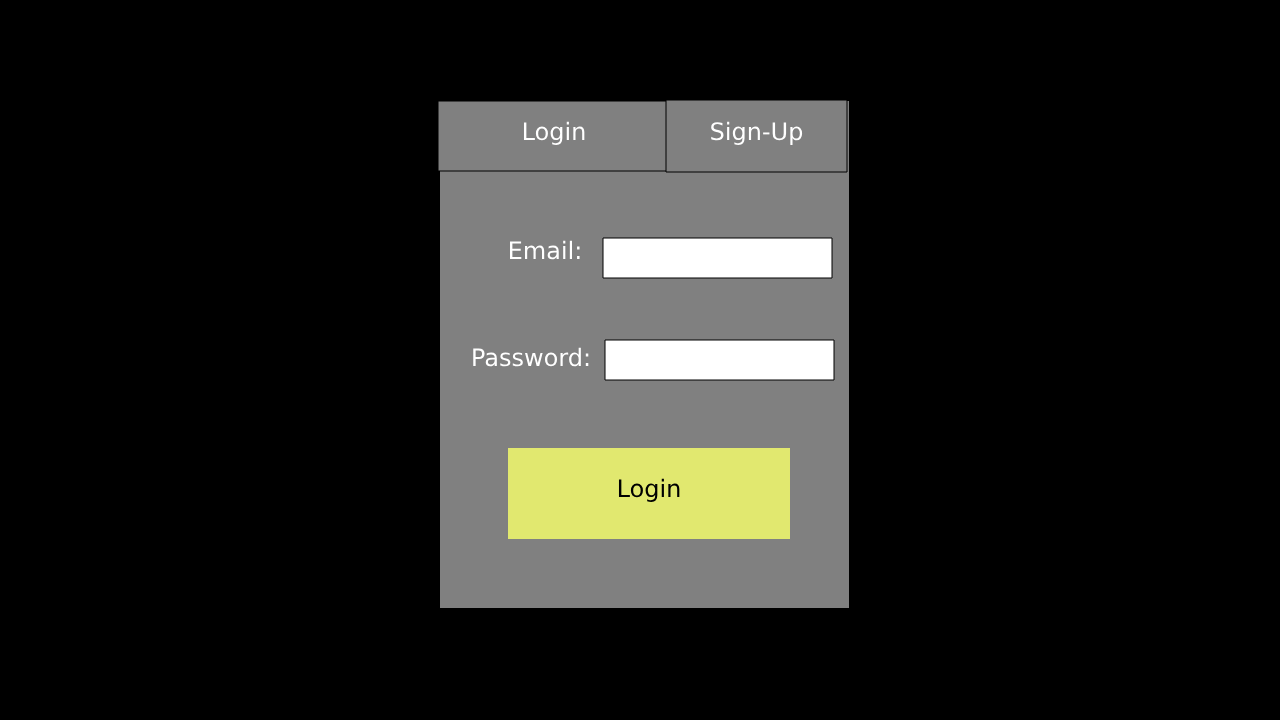
<style>
.page{position:relative;width:1280px;height:720px;background:#000000}
.page>*{position:absolute;margin:0}
.t1{font:24px "DejaVuSans";color:#ffffff}
.t2{font:24px "DejaVuSans";color:#000000}
</style>
<div class="page">
<p class="t1" style="left:523px;top:121px;width:62px;height:24px">Login</p>
<p class="t1" style="left:711px;top:121px;width:92px;height:24px">Sign-Up</p>
<p class="t1" style="left:510px;top:240px;width:70px;height:20px">Email:</p>
<p class="t1" style="left:473px;top:347px;width:116px;height:20px">Password:</p>
<p class="t2" style="left:618px;top:478px;width:62px;height:24px">Login</p>
</div>
